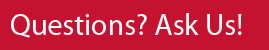
<style>
.page{position:relative;width:269px;height:50px;background:#c41230}
.page>*{position:absolute;margin:0}
.t1{font:30px "MyriadPro-Regular";color:#ffffff}
</style>
<div class="page">
<p class="t1" style="left:11px;top:13px;width:231px;height:25px">Questions? Ask Us!</p>
</div>
